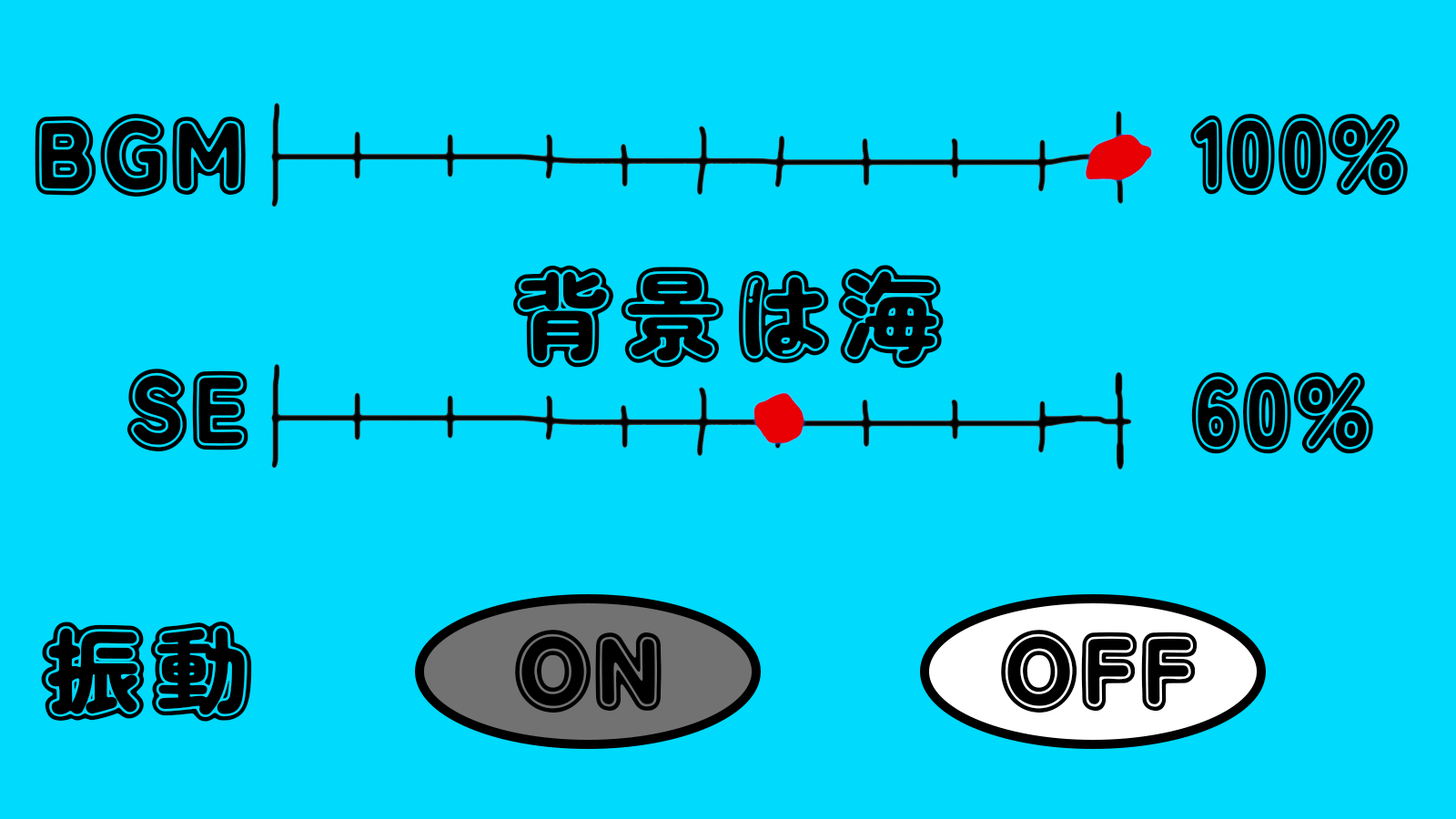
<style>
.page{position:relative;width:1456px;height:819px;background:#00dafc}
.page>*{position:absolute;margin:0}
.t1{font:109.2px "DokiDokiFantasia";color:#000000}
</style>
<div class="page">
<p class="t1" style="left:35px;top:114px;width:211px;height:83px">BGM</p>
<p class="t1" style="left:1190px;top:114px;width:218px;height:82px">100%</p>
<p class="t1" style="left:513px;top:265px;width:431px;height:104px">背景は海</p>
<p class="t1" style="left:126px;top:369px;width:122px;height:82px">SE</p>
<p class="t1" style="left:1191px;top:372px;width:182px;height:82px">60%</p>
<p class="t1" style="left:41px;top:622px;width:211px;height:100px">振動</p>
<p class="t1" style="left:515px;top:630px;width:147px;height:83px">ON</p>
<p class="t1" style="left:1001px;top:630px;width:197px;height:83px">OFF</p>
</div>
